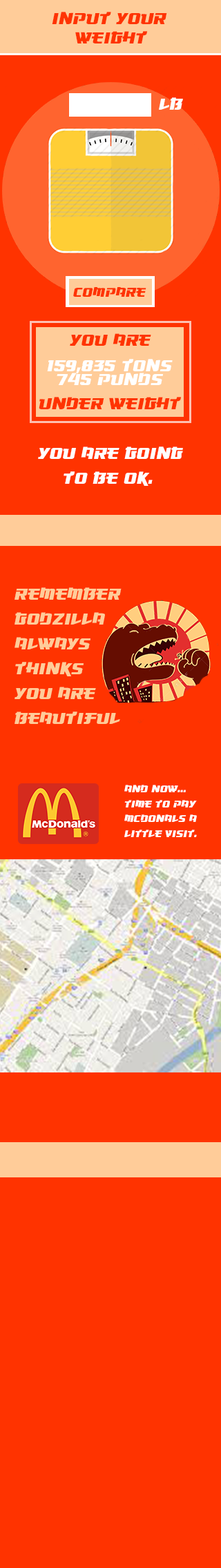
<style>
.page{position:relative;width:221px;height:1568px;background:#ff3300}
.page>*{position:absolute;margin:0}
.t1{font:20.7px "Osaka-SansSerif";color:#ff3300}
.t2{font:20.7px "Osaka-SansSerif";color:#ffffff}
.t3{font:16.6px "Osaka-SansSerif";color:#ff3300}
.t4{font:20.7px "Osaka-SansSerif";color:#ffcc99}
.t5{font:12.4px "Osaka-SansSerif";color:#ffffff}
</style>
<div class="page">
<p class="t1" style="left:52px;top:12px;width:115px;height:12px">Input Your</p>
<p class="t1" style="left:75px;top:31px;width:73px;height:12px">weight</p>
<p class="t2" style="left:159px;top:97px;width:24px;height:13px">lb</p>
<p class="t3" style="left:73px;top:287px;width:73px;height:10px">Compare</p>
<p class="t1" style="left:70px;top:333px;width:81px;height:13px">YOU ARE</p>
<p class="t2" style="left:47px;top:359px;width:126px;height:14px">159,835 tons</p>
<p class="t2" style="left:57px;top:373px;width:106px;height:12px">745 punds</p>
<p class="t1" style="left:39px;top:397px;width:143px;height:12px">Under Weight</p>
<p class="t2" style="left:38px;top:447px;width:145px;height:39px">You are going <br> to be ok.</p>
<p class="t4" style="left:14px;top:587px;width:107px;height:137px">Remember<br>Godzilla<br>Always<br>Thinks<br>You Are<br>Beautiful</p>
<p class="t5" style="left:124px;top:785px;width:73px;height:52px">And now...<br>TIME to Pay<br>Mcdonals a <br>little visit.</p>
</div>
